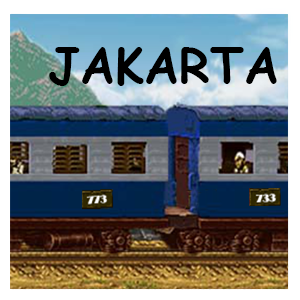
<style>
.page{position:relative;width:300px;height:300px}
.page>*{position:absolute;margin:0}
.t1{font:48px "ComicSansMS-Bold";color:#000000}
</style>
<div class="page">
<p class="t1" style="left:49px;top:47px;width:228px;height:39px">JAKARTA</p>
</div>
